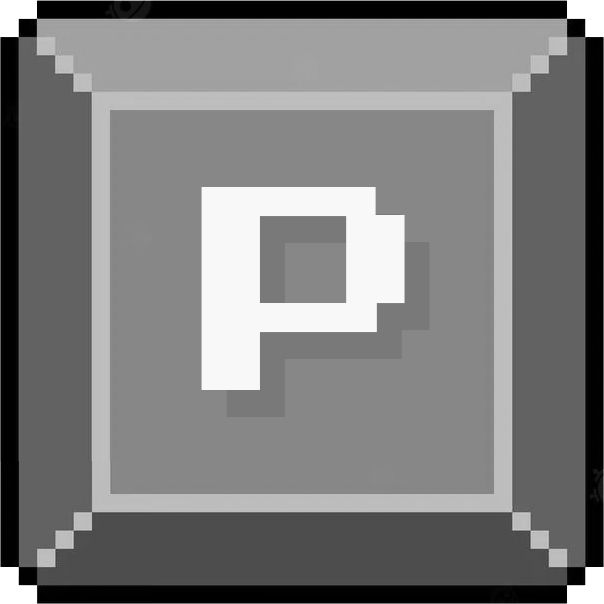
<style>
.page{position:relative;width:604px;height:604px;background:#878787}
.page>*{position:absolute;margin:0}
.t1{font:407.8px "ArcadeClassic";color:#f8f8f8}
</style>
<div class="page">
<p class="t1" style="left:201px;top:187px;width:204px;height:203px">P</p>
</div>
